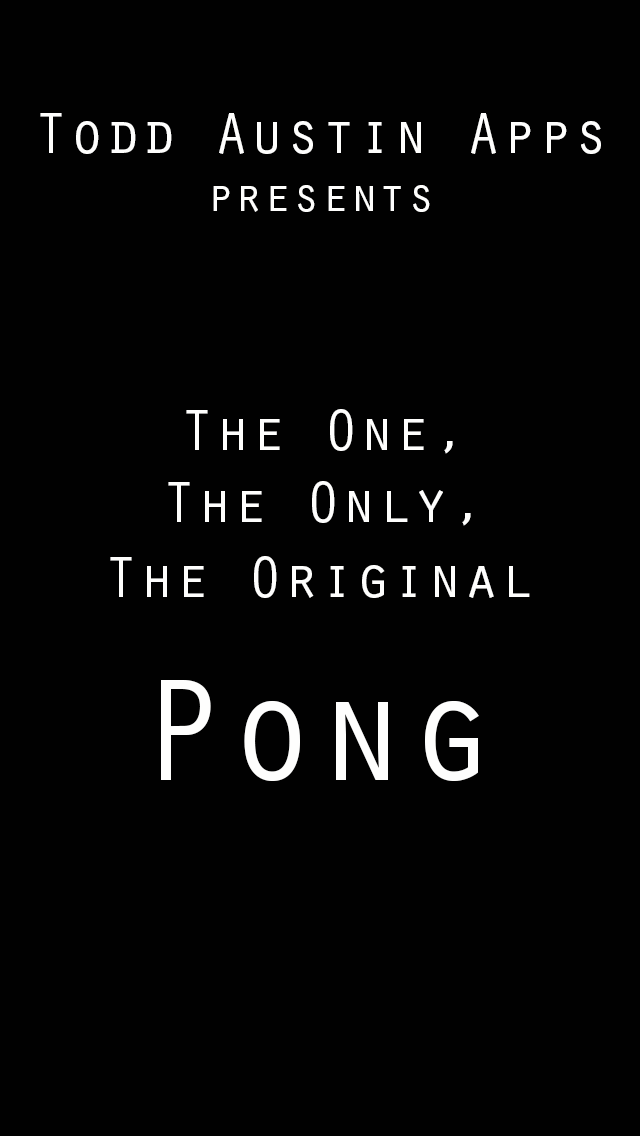
<style>
.page{position:relative;width:640px;height:1136px;background:#010101}
.page>*{position:absolute;margin:0}
.t1{font:60px "OratorStd";color:#fefefd}
.t2{font:48px "OratorStd";color:#fefefd}
.t3{font:150px "OratorStd";color:#fefefd}
</style>
<div class="page">
<p class="t1" style="left:40px;top:113px;width:561px;height:99px;text-align:center">Todd Austin Apps<br><span class="t2">presents</span></p>
<p class="t1" style="left:186px;top:409px;width:267px;height:45px">The One,</p>
<p class="t1" style="left:168px;top:481px;width:303px;height:45px">The Only,</p>
<p class="t1" style="left:110px;top:556px;width:420px;height:42px">The Original</p>
<p class="t3" style="left:161px;top:680px;width:318px;height:101px">Pong</p>
</div>
